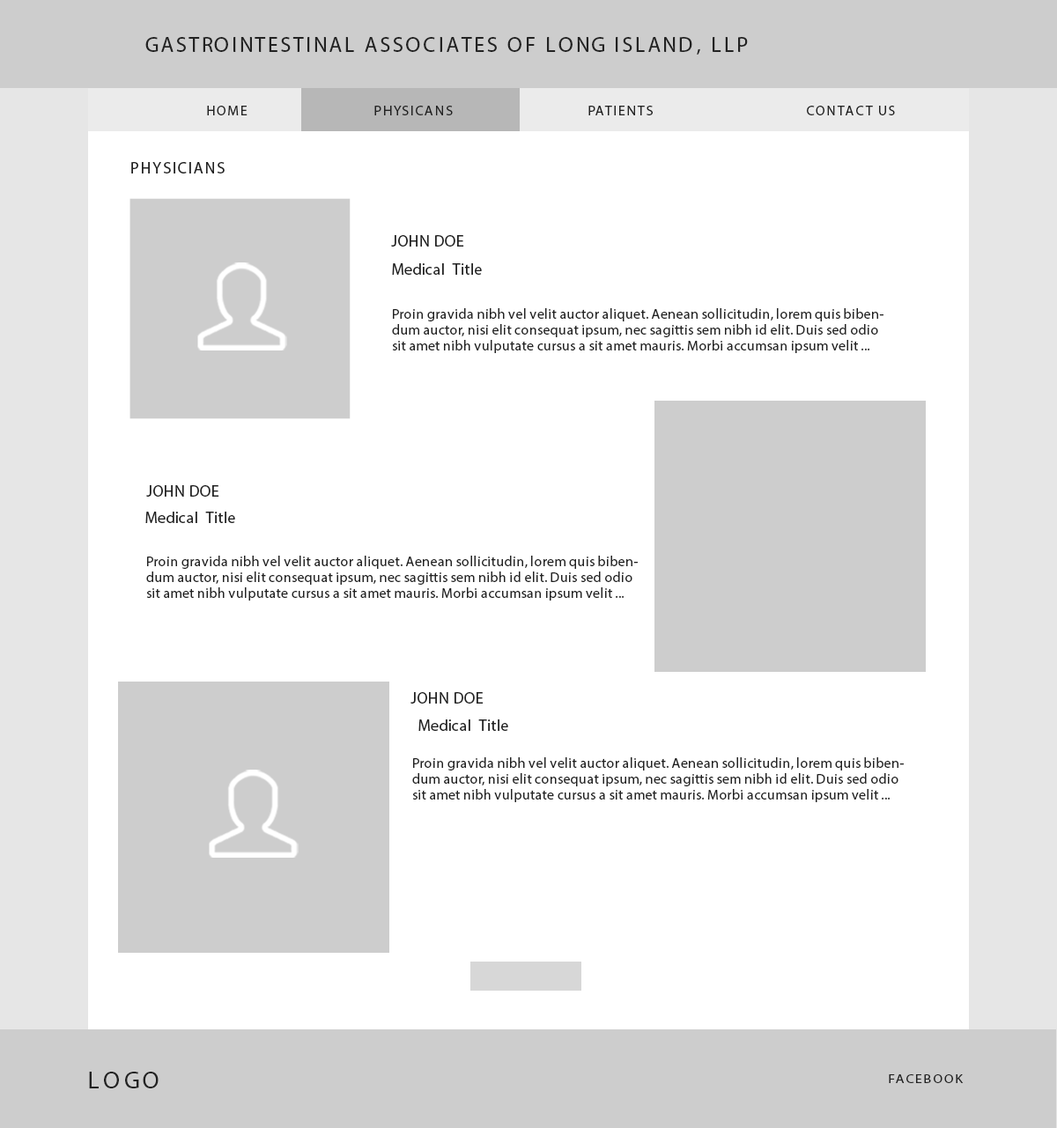
<style>
.page{position:relative;width:1057px;height:1128px;background:#ffffff}
.page>*{position:absolute;margin:0}
.t1{font:21.1px "MyriadPro-Regular";letter-spacing:0.12em;color:#222222;text-transform:uppercase}
.t2{font:14.1px "MyriadPro-Regular";letter-spacing:0.1em;color:#222222;text-transform:uppercase}
.t3{font:15.9px "MyriadPro-Regular";letter-spacing:0.1em;color:#222222;text-transform:uppercase}
.t4{font:15.9px "MyriadPro-Regular";letter-spacing:0.02em;color:#222222;text-transform:uppercase}
.t5{font:15.9px "MyriadPro-Regular";letter-spacing:0.02em;color:#222222}
.t6{font:14.1px/15.9px "MyriadPro-Regular";letter-spacing:0.02em;color:#222222}
.t7{font:24.7px "MyriadPro-Regular";letter-spacing:0.12em;color:#222222;text-transform:uppercase}
.t8{font:11.9px "MyriadPro-Regular";letter-spacing:0.1em;color:#222222;text-transform:uppercase;scale:1.18 1}
</style>
<div class="page">
<p class="t1" style="left:145px;top:37px;width:603px;height:18px">Gastrointestinal Associates of Long Island, LLP</p>
<p class="t2" style="left:207px;top:106px;width:688px;height:9px">Home             Physicans   Patients   COntact us</p>
<p class="t3" style="left:131px;top:162px;width:94px;height:12px">PhysicianS</p>
<p class="t4" style="left:391px;top:235px;width:73px;height:12px">John doe</p>
<p class="t5" style="left:392px;top:263px;width:90px;height:12px">Medical  Title</p>
<p class="t6" style="left:392px;top:308px;width:491px;height:45px">Proin gravida nibh vel velit auctor aliquet. Aenean sollicitudin, lorem quis bibendum auctor, nisi elit consequat ipsum, nec sagittis sem nibh id elit. Duis sed odio sit amet nibh vulputate cursus a sit amet mauris. Morbi accumsan ipsum velit ...</p>
<p class="t4" style="left:146px;top:485px;width:73px;height:12px">John doe</p>
<p class="t5" style="left:145px;top:512px;width:90px;height:11px">Medical  Title</p>
<p class="t6" style="left:146px;top:556px;width:492px;height:45px">Proin gravida nibh vel velit auctor aliquet. Aenean sollicitudin, lorem quis bibendum auctor, nisi elit consequat ipsum, nec sagittis sem nibh id elit. Duis sed odio sit amet nibh vulputate cursus a sit amet mauris. Morbi accumsan ipsum velit ...</p>
<p class="t4" style="left:410px;top:692px;width:74px;height:12px">John doe</p>
<p class="t5" style="left:418px;top:720px;width:90px;height:11px">Medical  Title</p>
<p class="t6" style="left:412px;top:757px;width:492px;height:45px">Proin gravida nibh vel velit auctor aliquet. Aenean sollicitudin, lorem quis bibendum auctor, nisi elit consequat ipsum, nec sagittis sem nibh id elit. Duis sed odio sit amet nibh vulputate cursus a sit amet mauris. Morbi accumsan ipsum velit ...</p>
<p class="t7" style="left:89px;top:1072px;width:70px;height:17px">LOGO</p>
<p class="t8" style="left:889px;top:1075px;width:75px;height:8px">Facebook</p>
</div>
